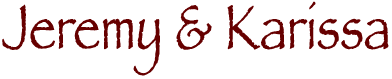
<style>
.page{position:relative;width:392px;height:79px;background:#ffffff}
.page>*{position:absolute;margin:0}
.t1{font:65px "Papyrus";color:#660000;scale:0.77 1}
</style>
<div class="page">
<p class="t1" style="left:2px;top:1px;width:387px;height:75px">Jeremy &amp; Karissa</p>
</div>
